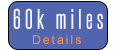
<style>
.page{position:relative;width:116px;height:50px;background:#5065ae}
.page>*{position:absolute;margin:0}
.t1{font:24px "SteelfishRg-Regular";letter-spacing:0.175em;color:#f7f8fb}
.t2{font:12px "ArialMT";letter-spacing:0.175em;color:#f79441}
</style>
<div class="page">
<p class="t1" style="left:13px;top:8px;width:90px;height:21px">60k miles</p>
<p class="t2" style="left:33px;top:35px;width:48px;height:9px">Details</p>
</div>
